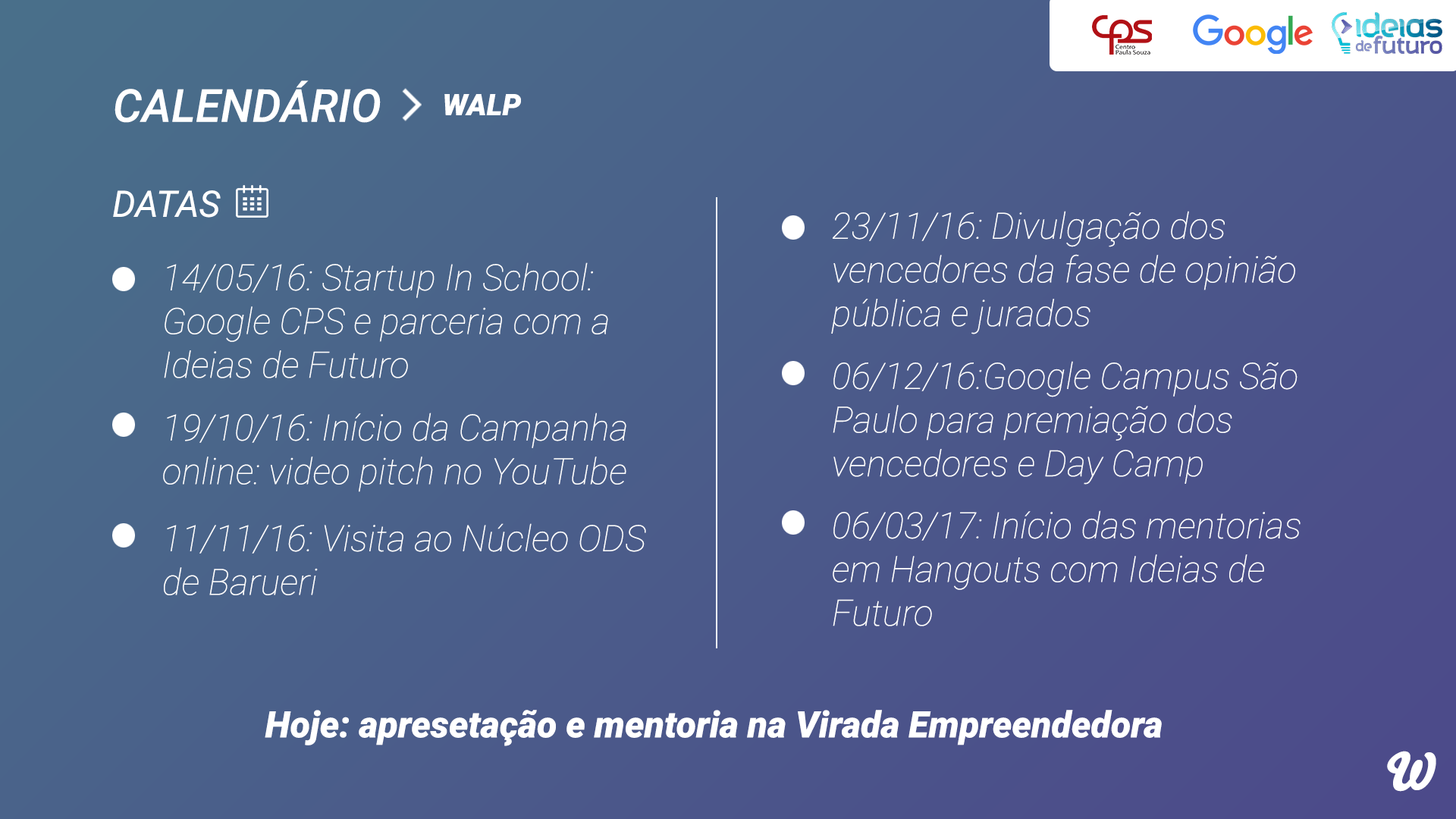
<style>
.page{position:relative;width:1456px;height:819px}
.page>*{position:absolute;margin:0}
.t1{font:45.5px "Roboto-MediumItalic";color:#ffffff}
.t2{font:29.7px "Roboto-BlackItalic";color:#ffffff}
.t3{font:36.4px "Roboto-Italic";color:#ffffff}
.t4{font:36.4px "Roboto-ThinItalic";color:#ffffff}
.t5{font:36.4px "Roboto-BlackItalic";color:#ffffff}
.t6{font:50.8px "Bello-Pro";color:#ffffff}
</style>
<div class="page">
<p class="t1" style="left:115px;top:80px;width:266px;height:43px">CALENDÁRIO</p>
<p class="t2" style="left:444px;top:94px;width:77px;height:21px">WALP</p>
<p class="t3" style="left:113px;top:190px;width:108px;height:28px">DATAS</p>
<p class="t4" style="left:831px;top:211px;width:464px;height:123px">23/11/16: Divulgação dos vencedores da fase de opinião pública e jurados</p>
<p class="t4" style="left:164px;top:262px;width:444px;height:116px">14/05/16: Startup In School: Google CPS e parceria com a Ideias de Futuro</p>
<p class="t4" style="left:833px;top:361px;width:464px;height:124px">06/12/16:Google Campus São Paulo para premiação dos vencedores e Day Camp</p>
<p class="t4" style="left:163px;top:413px;width:463px;height:79px">19/10/16: Início da Campanha online: video pitch no YouTube</p>
<p class="t4" style="left:833px;top:510px;width:468px;height:116px">06/03/17: Início das mentorias em Hangouts com Ideias de Futuro</p>
<p class="t4" style="left:164px;top:523px;width:482px;height:72px">11/11/16: Visita ao Núcleo ODS de Barueri</p>
<p class="t5" style="left:265px;top:710px;width:897px;height:36px">Hoje: apresetação e mentoria na Virada Empreendedora</p>
<p class="t6" style="left:1387px;top:751px;width:49px;height:41px">W</p>
</div>
